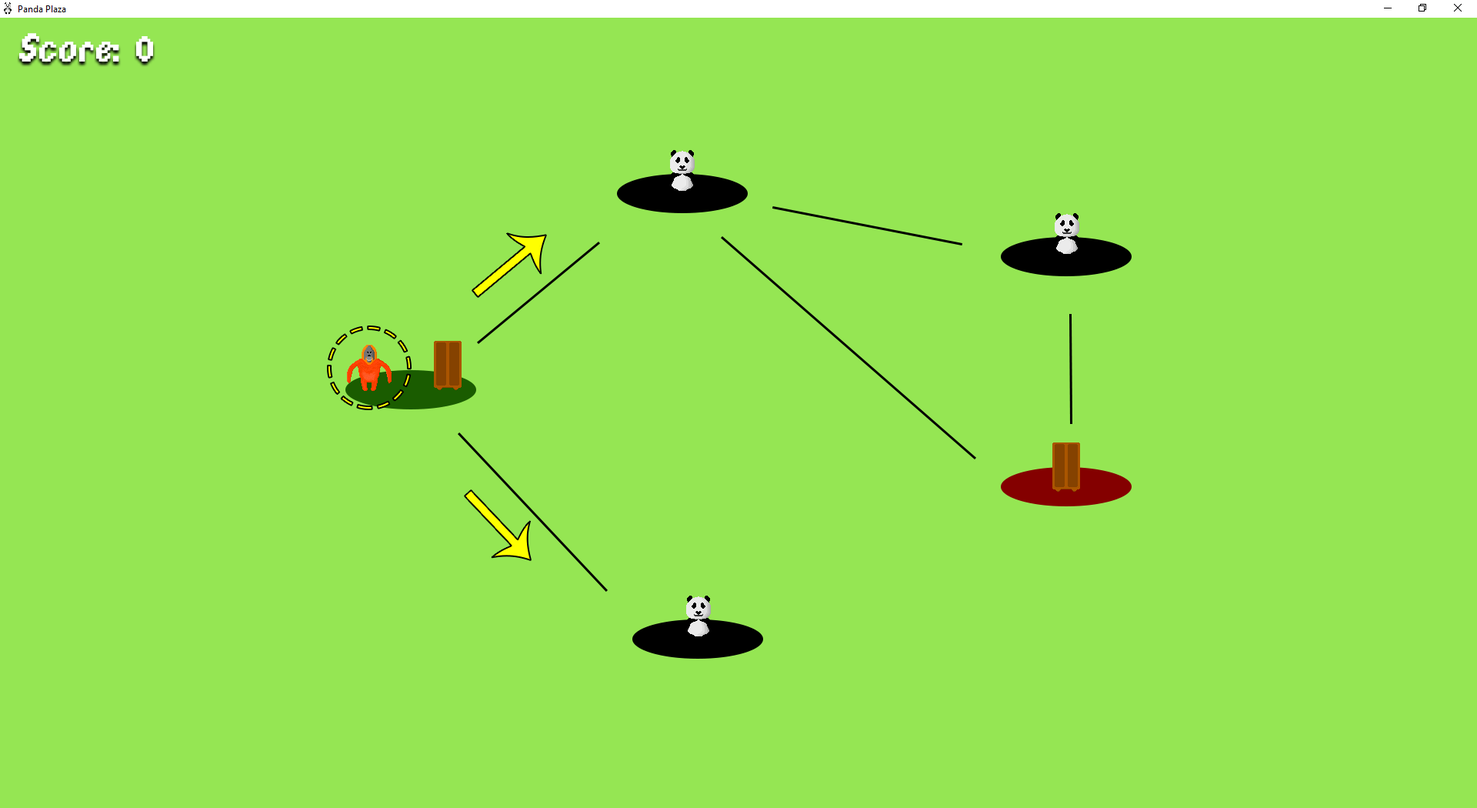
<style>
.page{position:relative;width:1477px;height:808px;background:#95e653}
.page>*{position:absolute;margin:0}
.t1{font:43.8px "DPComicRegular";color:#ffffff}
</style>
<div class="page">
<p class="t1" style="left:19px;top:33px;width:134px;height:29px">Score: 0</p>
</div>
